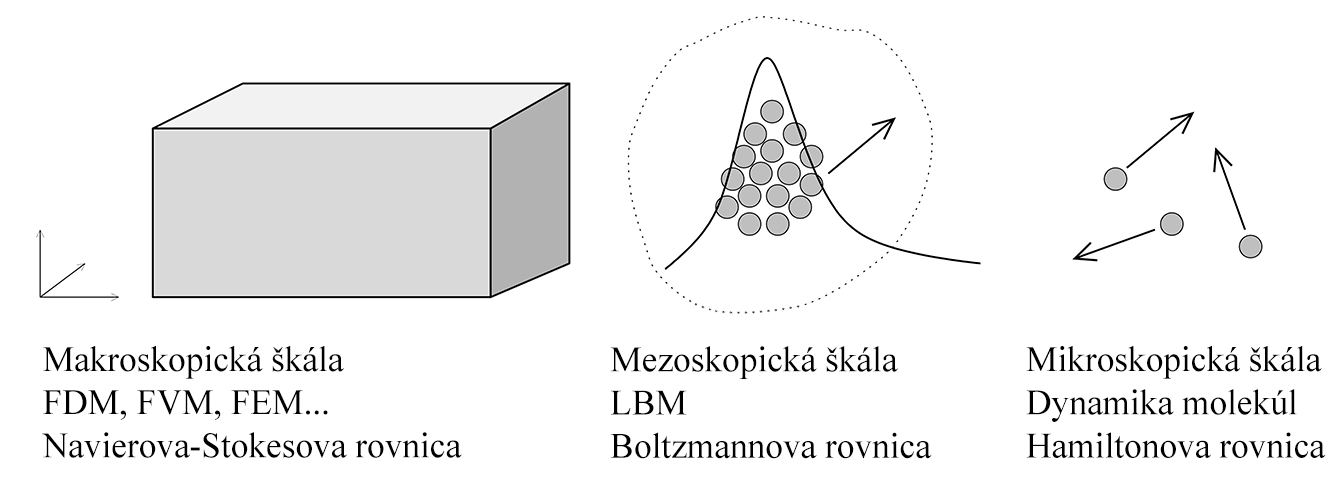
<style>
.page{position:relative;width:1334px;height:497px;background:#ffffff}
.page>*{position:absolute;margin:0}
.t1{font:36px "TimesNewRomanPSMT";color:#000000}
</style>
<div class="page">
<p class="t1" style="left:42px;top:346px;width:420px;height:112px">Makroskopická škála<br>FDM, FVM, FEM...<br>Navierova-Stokesova rovnica</p>
<p class="t1" style="left:610px;top:346px;width:322px;height:113px">Mezoskopická škála<br>LBM<br>Boltzmannova rovnica</p>
<p class="t1" style="left:1026px;top:346px;width:300px;height:112px">Mikroskopická škála<br>Dynamika molekúl<br>Hamiltonova rovnica</p>
</div>
